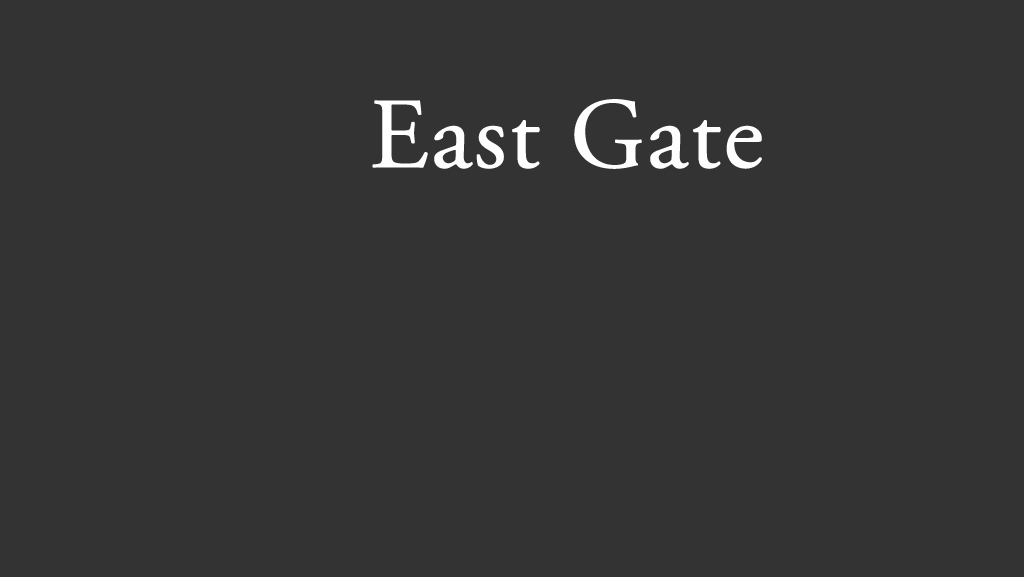
<style>
.page{position:relative;width:1024px;height:577px;background:#333333}
.page>*{position:absolute;margin:0}
.t1{font:100px "AGaramondPro-Regular";color:#fefefe;font-weight:bold}
</style>
<div class="page">
<p class="t1" style="left:372px;top:99px;width:390px;height:70px">East Gate</p>
</div>
